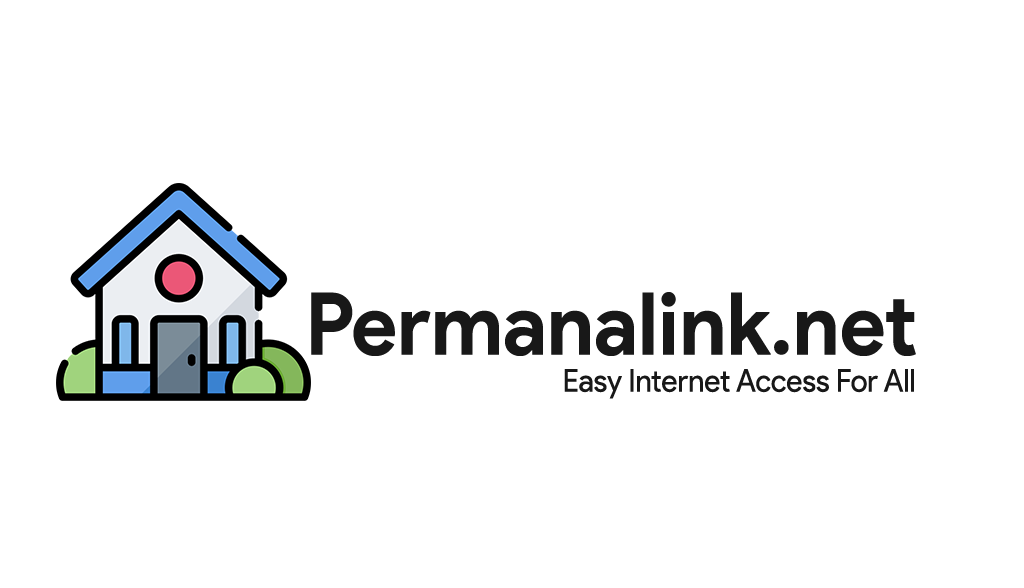
<style>
.page{position:relative;width:1024px;height:588px;background:#ffffff}
.page>*{position:absolute;margin:0}
.t1{font:86.4px "ProductSans-Bold";color:#181818;scale:0.95 1}
.t2{font:31.2px "ProductSans-Regular";color:#181818;scale:0.95 1}
</style>
<div class="page">
<p class="t1" style="left:311px;top:292px;width:605px;height:64px">Permanalink.net</p>
<p class="t2" style="left:564px;top:369px;width:350px;height:30px">Easy Internet Access For All</p>
</div>
